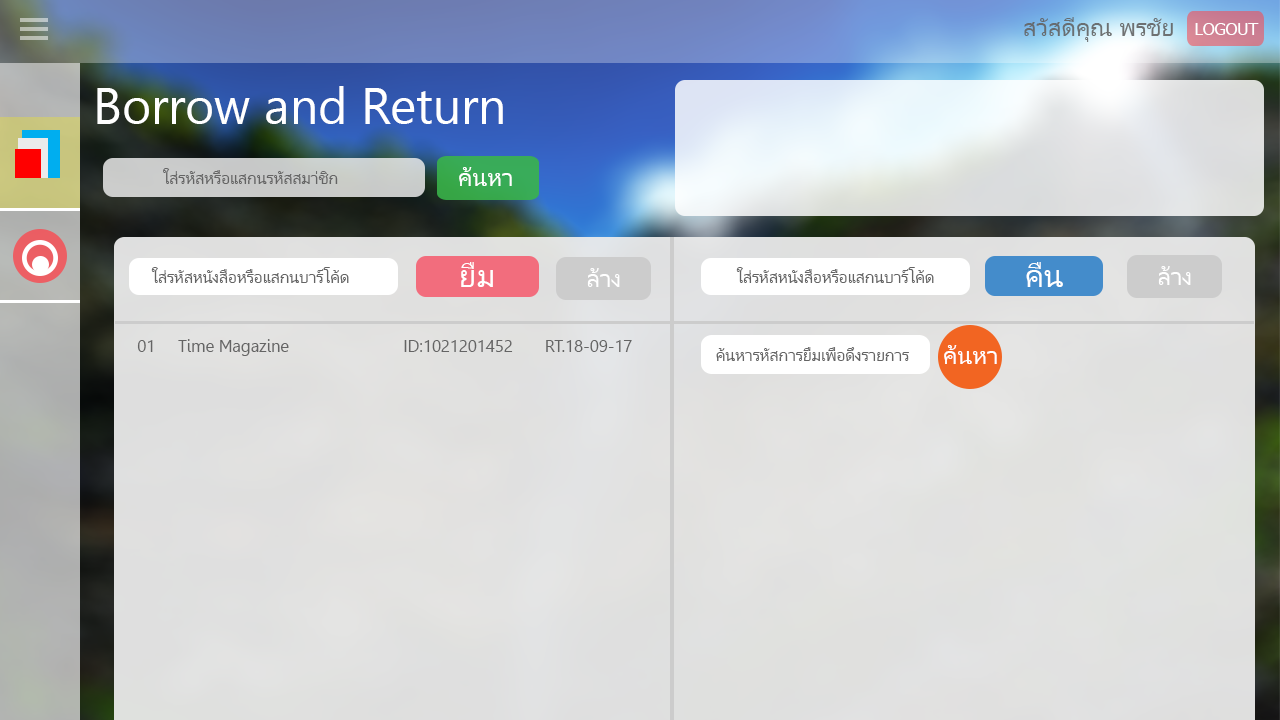
<style>
.page{position:relative;width:1280px;height:720px}
.page>*{position:absolute;margin:0}
.t1{font:25px "Leelawadee";color:#646464}
.t2{font:16.7px "Tahoma";color:#ffffff}
.t3{font:50px "Leelawadee";color:#ffffff}
.t4{font:16.7px "Leelawadee";color:#646464}
.t5{font:25px "Leelawadee";color:#ffffff}
.t6{font:33.3px "Leelawadee";color:#ffffff}
</style>
<div class="page">
<p class="t1" style="left:1024px;top:17px;width:149px;height:25px;opacity:0.93">สวัสดีคุณ พรชัย</p>
<p class="t2" style="left:1195px;top:23px;width:64px;height:12px">LOGOUT</p>
<p class="t3" style="left:97px;top:86px;width:406px;height:38px">Borrow and Return</p>
<p class="t4" style="left:163px;top:168px;width:175px;height:16px">ใส่รหัสหรือแสกนรหัสสมา่ชิก</p>
<p class="t5" style="left:459px;top:167px;width:53px;height:19px">ค้นหา</p>
<p class="t4" style="left:151px;top:267px;width:198px;height:16px">ใส่รหัสหนังสือหรือแสกนบาร์โค้ด</p>
<p class="t6" style="left:461px;top:262px;width:32px;height:25px">ยืม</p>
<p class="t5" style="left:587px;top:268px;width:33px;height:19px">ล้าง</p>
<p class="t4" style="left:736px;top:267px;width:198px;height:16px">ใส่รหัสหนังสือหรือแสกนบาร์โค้ด</p>
<p class="t6" style="left:1026px;top:262px;width:37px;height:25px">คืน</p>
<p class="t5" style="left:1158px;top:266px;width:33px;height:19px">ล้าง</p>
<p class="t4" style="left:137px;top:339px;width:495px;height:17px">01     Time Magazine                         ID:1021201452       RT.18-09-17</p>
<p class="t4" style="left:716px;top:347px;width:193px;height:14px">ค้นหารหัสการยืมเพื่อดึงรายการ</p>
<p class="t5" style="left:944px;top:345px;width:53px;height:19px">ค้นหา</p>
</div>
